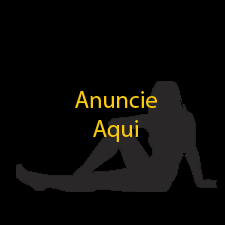
<style>
.page{position:relative;width:225px;height:225px;background:#000000}
.page>*{position:absolute;margin:0}
.t1{font:24px "MyriadPro-Regular";color:#faca0e}
</style>
<div class="page">
<p class="t1" style="left:75px;top:91px;width:82px;height:51px;text-align:center">Anuncie<br>Aqui</p>
</div>
